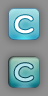
<style>
.page{position:relative;width:48px;height:96px}
.page>*{position:absolute;margin:0}
.t1{font:24px "DFMaruMoji-W9-WING-RKSJ-H";color:#ffffff;font-weight:bold}
.t2{font:24px "DFMaruMoji-W9-WING-RKSJ-H";color:#b5e3e9;font-weight:bold}
</style>
<div class="page">
<p class="t1" style="left:14px;top:15px;width:20px;height:19px">C</p>
<p class="t2" style="left:14px;top:63px;width:20px;height:19px">C</p>
</div>
